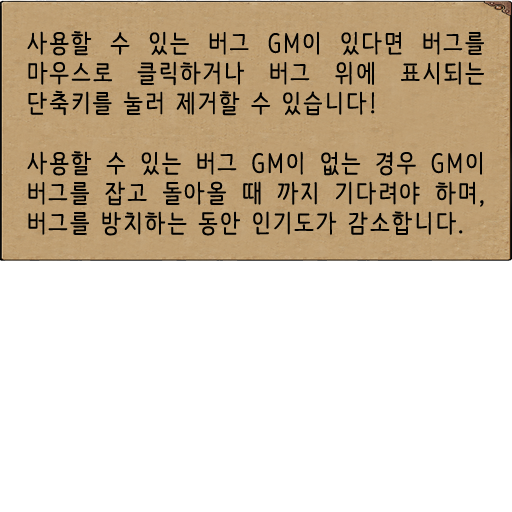
<style>
.page{position:relative;width:512px;height:512px;background:#ffffff}
.page>*{position:absolute;margin:0}
.t1{font:25px "NanumBarunpen";letter-spacing:0.075em;color:#000000;font-weight:bold}
</style>
<div class="page">
<p class="t1" style="left:27px;top:31px;width:457px;height:205px;text-align:justify">사용할 수 있는 버그 GM이 있다면 버그를 마우스로 클릭하거나 버그 위에 표시되는 단축키를 눌러 제거할 수 있습니다!<br><br>사용할 수 있는 버그 GM이 없는 경우 GM이 버그를 잡고 돌아올 때 까지 기다려야 하며, 버그를 방치하는 동안 인기도가 감소합니다.</p>
</div>
